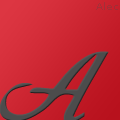
<style>
.page{position:relative;width:120px;height:120px}
.page>*{position:absolute;margin:0}
.t1{font:10px "Verdana";letter-spacing:0.025em;color:#a32f37}
.t2{font:150px "Today";letter-spacing:-0.01em;color:#4c4c4c}
</style>
<div class="page">
<p class="t1" style="left:96px;top:2px;width:22px;height:8px">Alec</p>
<p class="t2" style="left:0px;top:51px;width:109px;height:71px">A</p>
</div>
